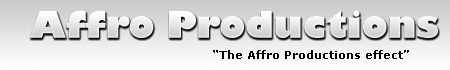
<style>
.page{position:relative;width:450px;height:70px}
.page>*{position:absolute;margin:0}
.t1{font:36px "GillSans-UltraBold";color:#e9e9e9}
.t2{font:11px "Verdana-Bold";color:#000000}
</style>
<div class="page">
<p class="t1" style="left:30px;top:10px;width:408px;height:28px">Affro Productions</p>
<p class="t2" style="left:213px;top:50px;width:196px;height:9px">“The Affro Productions effect”</p>
</div>
